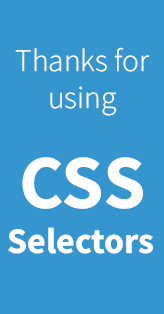
<style>
.page{position:relative;width:164px;height:314px;background:#3595cf}
.page>*{position:absolute;margin:0}
.t1{font:31.5px "SourceSansRoman-Light";color:#ffffff}
.t2{font:76.6px "SourceSansRoman-Bold";color:#ffffff}
.t3{font:36px "SourceSansRoman-Bold";color:#ffffff}
</style>
<div class="page">
<p class="t1" style="left:15px;top:47px;width:135px;height:25px">Thanks for</p>
<p class="t1" style="left:50px;top:86px;width:67px;height:30px">using</p>
<p class="t2" style="left:22px;top:157px;width:121px;height:52px">CSS</p>
<p class="t3" style="left:8px;top:227px;width:146px;height:27px">Selectors</p>
</div>
